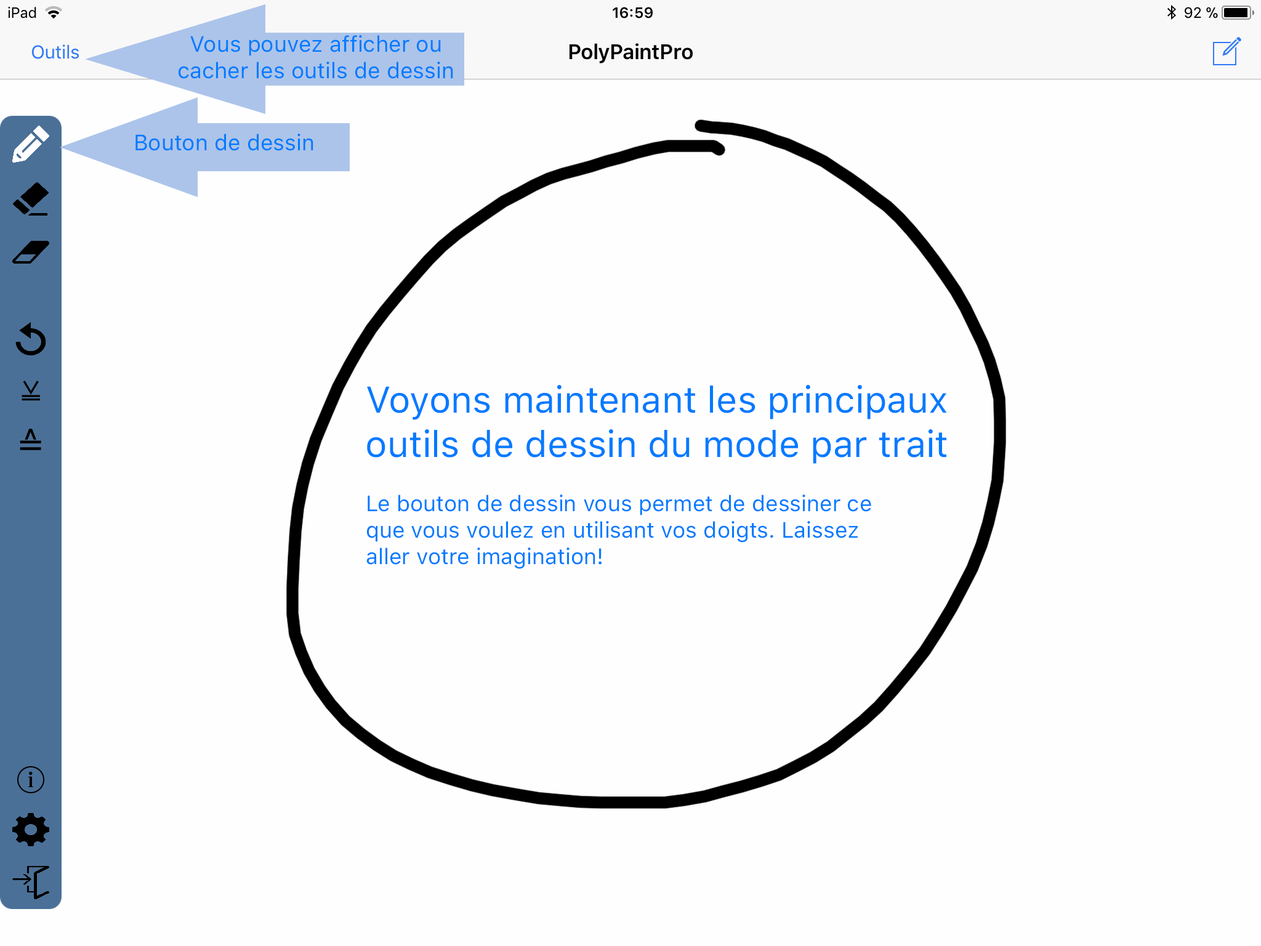
<style>
.page{position:relative;width:1261px;height:946px;background:#fffeff}
.page>*{position:absolute;margin:0}
.t1{font:22.2px "SFProText-Regular";color:#007aff}
.t2{font:36.9px "SFProText-Regular";color:#007aff}
</style>
<div class="page">
<p class="t1" style="left:179px;top:35px;width:274px;height:44px;text-align:center">Vous pouvez afficher ou cacher les outils de dessin avec ce bouton</p>
<p class="t1" style="left:135px;top:134px;width:178px;height:17px">Bouton de dessin</p>
<p class="t2" style="left:367px;top:385px;width:580px;height:79px;text-align:center">Voyons maintenant les principaux outils de dessin du mode par trait</p>
<p class="t1" style="left:366px;top:494px;width:505px;height:75px">Le bouton de dessin vous permet de dessiner ce que vous voulez en utilisant vos doigts. Laissez aller votre imagination!</p>
</div>
